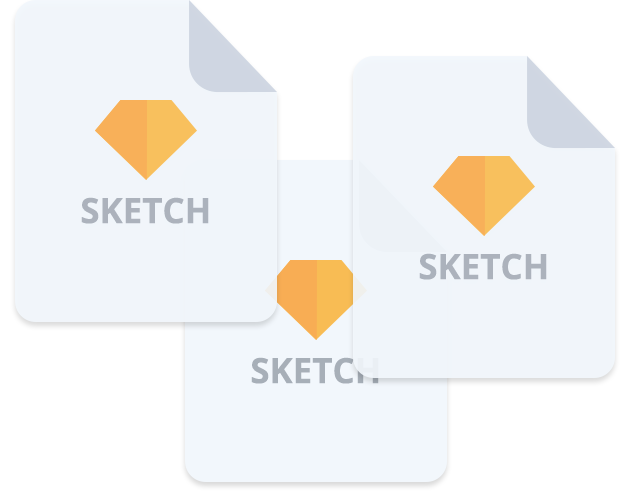
<style>
.page{position:relative;width:630px;height:500px;background:#f1f5fa}
.page>*{position:absolute;margin:0}
.t1{font:34.9px "OpenSans-Bold";color:#a4acb6}
</style>
<div class="page">
<p class="t1" style="left:81px;top:197px;width:128px;height:27px">SKETCH</p>
<p class="t1" style="left:419px;top:253px;width:128px;height:27px">SKETCH</p>
<p class="t1" style="left:251px;top:357px;width:128px;height:27px">SKETCH</p>
</div>
